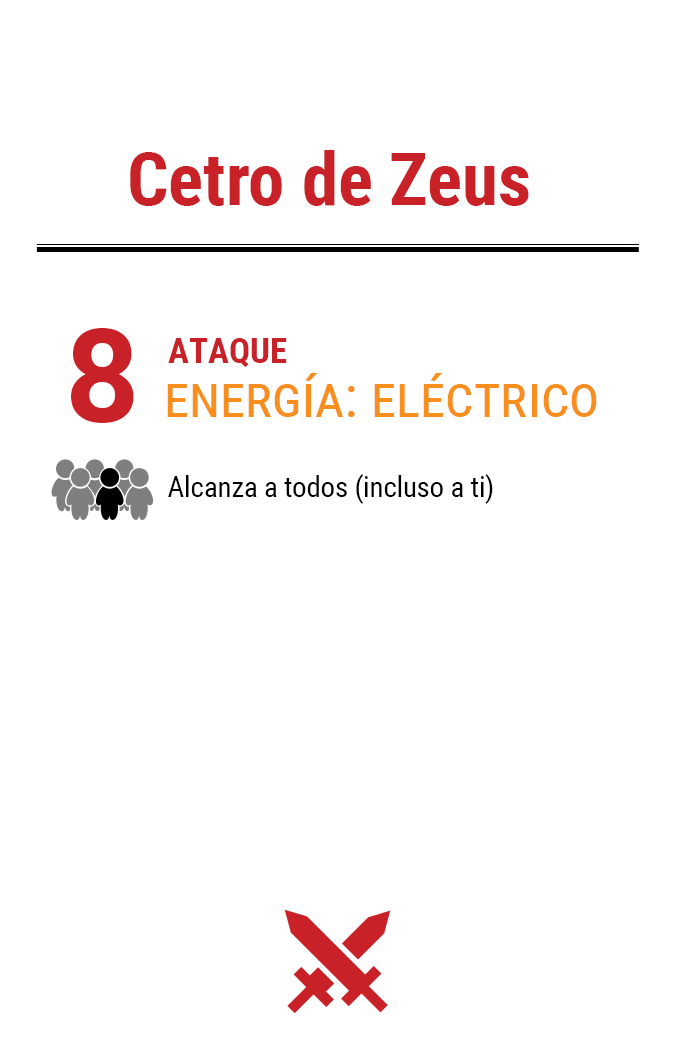
<style>
.page{position:relative;width:675px;height:1050px;background:#ffffff}
.page>*{position:absolute;margin:0}
.t1{font:72.9px "RobotoCondensed-Bold";color:#c82127}
.t2{font:130px "Roboto-Bold";letter-spacing:-0.06em;color:#c82127}
.t3{font:35px "RobotoCondensed-Bold";color:#c82127}
.t4{font:58.3px "RobotoCondensed-Regular";color:#f78e1e;font-variant:small-caps}
.t5{font:29.2px "RobotoCondensed-Regular";letter-spacing:-0.01em;color:#000000}
</style>
<div class="page">
<p class="t1" style="left:130px;top:150px;width:399px;height:56px">Cetro de Zeus</p>
<p class="t2" style="left:71px;top:328px;width:63px;height:95px">8</p>
<p class="t3" style="left:168px;top:338px;width:119px;height:29px">ATAQUE</p>
<p class="t4" style="left:167px;top:373px;width:430px;height:44px">energía: eléctrico</p>
<p class="t5" style="left:168px;top:474px;width:325px;height:30px">Alcanza a todos (incluso a ti)</p>
</div>
